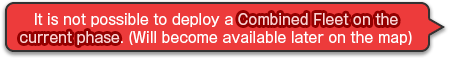
<style>
.page{position:relative;width:450px;height:58px;background:#ed3b3b}
.page>*{position:absolute;margin:0}
.t1{font:14px/18px "GothicMB101Pro-Regular";color:#ffffff}
.t2{font:14px/18px "GothicMB101Pro-Regular";color:#ffd3d3}
</style>
<div class="page">
<p class="t1" style="left:20px;top:13px;width:392px;height:32px;text-align:center">It is not possible to deploy a<span class="t2"> Combined Fleet on the<br>current phase</span>. (Will become available later on the map)</p>
<p class="t1" style="left:20px;top:13px;width:392px;height:32px;text-align:center">It is not possible to deploy a<span class="t2"> Combined Fleet on the<br>current phase</span>. (Will become available later on the map)</p>
</div>
